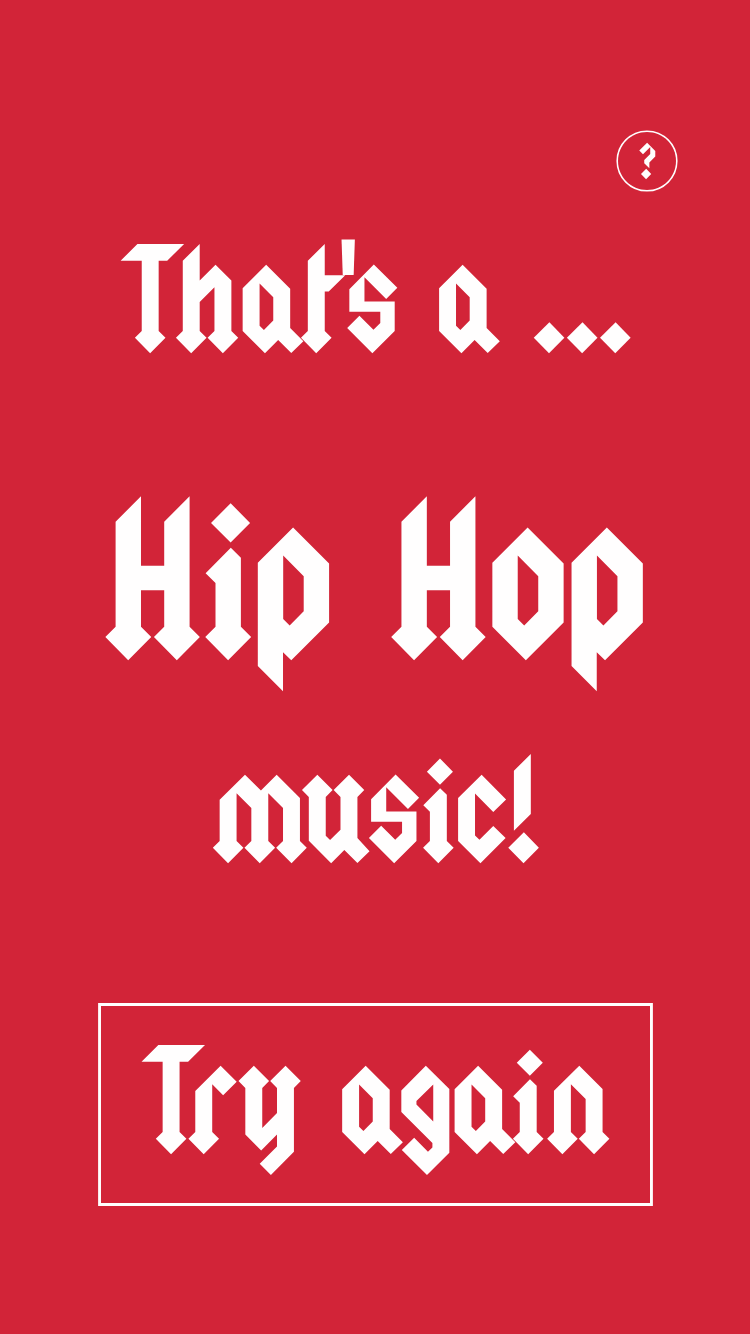
<style>
.page{position:relative;width:750px;height:1334px;background:#d22438}
.page>*{position:absolute;margin:0}
.t1{font:40px "Squealer";color:#fffefe}
.t2{font:120px "Squealer";color:#fffefe}
.t3{font:180px "Squealer";color:#fffefe}
</style>
<div class="page">
<p class="t1" style="left:639px;top:142px;width:17px;height:38px">?</p>
<p class="t2" style="left:120px;top:239px;width:511px;height:115px">That's a ...</p>
<p class="t3" style="left:105px;top:496px;width:538px;height:196px">Hip Hop</p>
<p class="t2" style="left:212px;top:753px;width:327px;height:111px">music!</p>
<p class="t2" style="left:141px;top:1044px;width:469px;height:132px">Try again</p>
</div>
